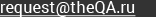
<style>
.page{position:relative;width:156px;height:17px;background:#333333}
.page>*{position:absolute;margin:0}
.t1{font:16px "Roboto-Regular";letter-spacing:0.025em;color:#ffffff;text-decoration:underline}
</style>
<div class="page">
<p class="t1" style="left:0px;top:1px;width:136px;height:16px">request@theQA.ru</p>
</div>
